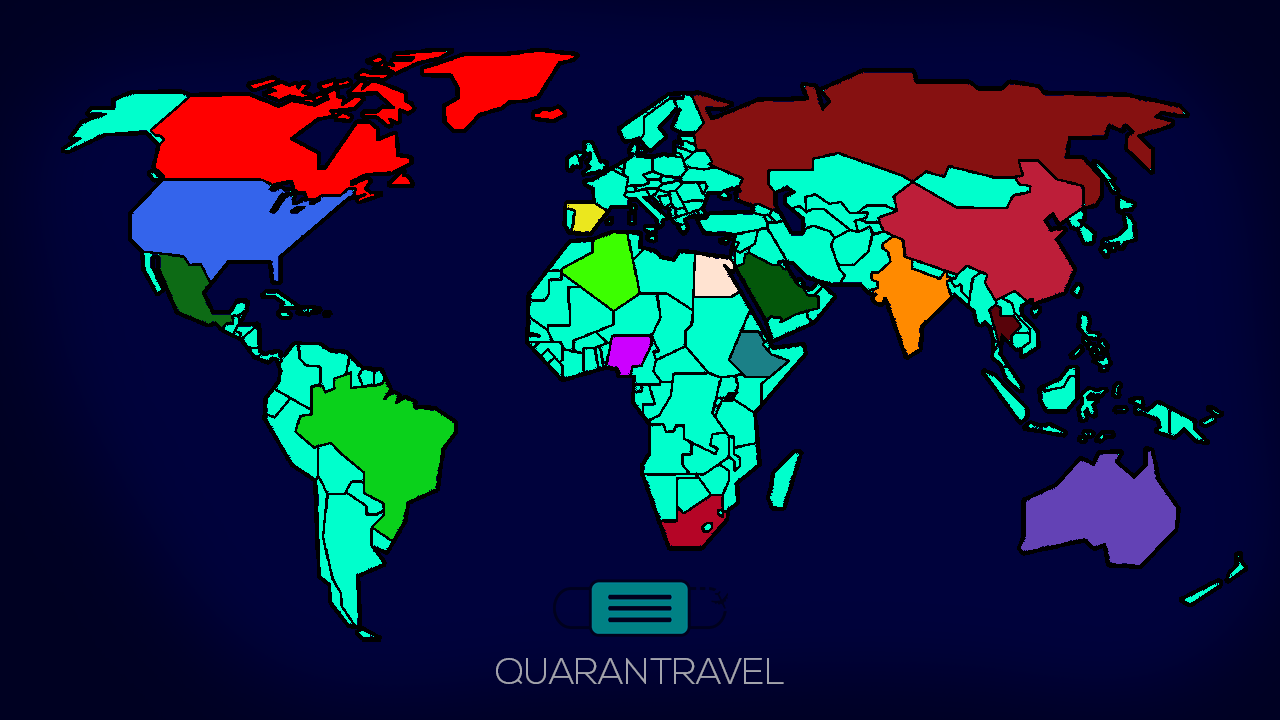
<style>
.page{position:relative;width:1280px;height:720px;background:#00023c}
.page>*{position:absolute;margin:0}
.t1{font:36.7px "NexaLight";color:#a3a4ad}
</style>
<div class="page">
<p class="t1" style="left:496px;top:658px;width:288px;height:26px">QUARANTRAVEL</p>
</div>
